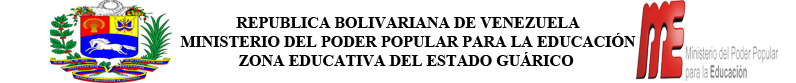
<style>
.page{position:relative;width:796px;height:83px;background:#ffffff}
.page>*{position:absolute;margin:0}
.t1{font:16px "TimesNewRomanPS-BoldMT";color:#000000}
</style>
<div class="page">
<p class="t1" style="left:180px;top:17px;width:456px;height:49px;text-align:center">REPUBLICA BOLIVARIANA DE VENEZUELA<br>MINISTERIO DEL PODER POPULAR PARA LA EDUCACIÓN<br>ZONA EDUCATIVA DEL ESTADO GUÁRICO</p>
</div>
